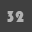
<style>
.page{position:relative;width:32px;height:32px;background:#404040}
.page>*{position:absolute;margin:0}
.t1{font:16px "Bauhaus93";color:#b1b1b1}
</style>
<div class="page">
<p class="t1" style="left:7px;top:11px;width:17px;height:11px">32</p>
</div>
